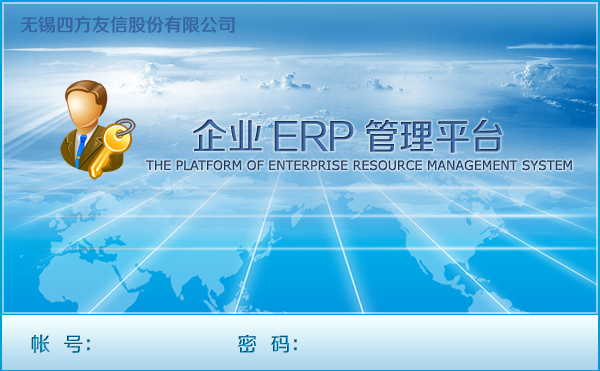
<style>
.page{position:relative;width:600px;height:371px}
.page>*{position:absolute;margin:0}
.t1{font:18px "FZZZHUNHJW--GB1-0";color:#3864a1}
.t2{font:36.2px "FZZZHUNHJW--GB1-0"}
.t3{font:13px "Verdana";text-transform:uppercase;scale:0.97 1}
.t4{font:20px "FZZZHUNHJW--GB1-0"}
</style>
<div class="page">
<p class="t1" style="left:21px;top:16px;width:214px;height:17px">无锡四方友信股份有限公司</p>
<p class="t2" style="left:193px;top:119px;width:310px;height:34px">企业ERP管理平台</p>
<p class="t3" style="left:146px;top:160px;width:426px;height:11px">The platform OF Enterprise REsouRCE management system</p>
<p class="t4" style="left:31px;top:334px;width:59px;height:19px">帐  号：</p>
<p class="t4" style="left:238px;top:335px;width:59px;height:18px">密  码：</p>
</div>
